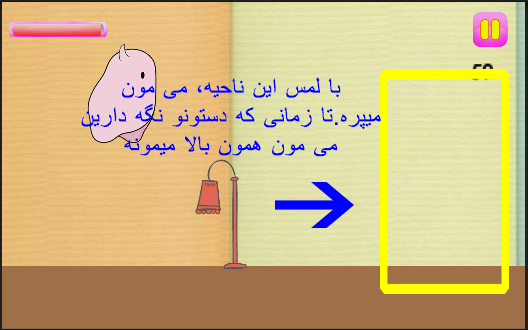
<style>
.page{position:relative;width:528px;height:330px}
.page>*{position:absolute;margin:0}
.t1{font:24px "ArialMT";letter-spacing:0.025em;color:#0000fe}
</style>
<div class="page">
<p class="t1" style="left:81px;top:77px;width:300px;height:80px;text-align:center">با لمس این ناحیه، می مون<br>میپره.تا زمانی که دستونو نگه دارین<br>می مون همون بالا میمونه</p>
</div>
